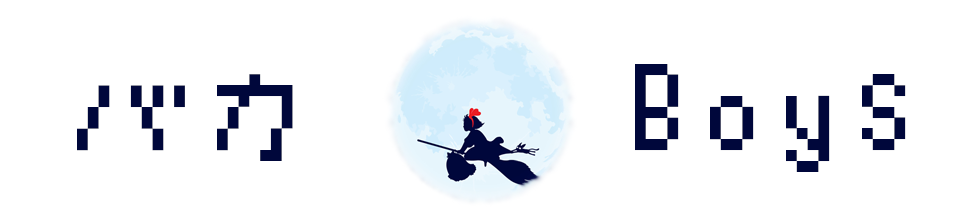
<style>
.page{position:relative;width:960px;height:220px;background:#ffffff}
.page>*{position:absolute;margin:0}
.t1{font:130px "JackeyFont";color:#00073b}
</style>
<div class="page">
<p class="t1" style="left:635px;top:64px;width:271px;height:108px">Boys</p>
<p class="t1" style="left:77px;top:74px;width:216px;height:87px">バカ</p>
</div>
